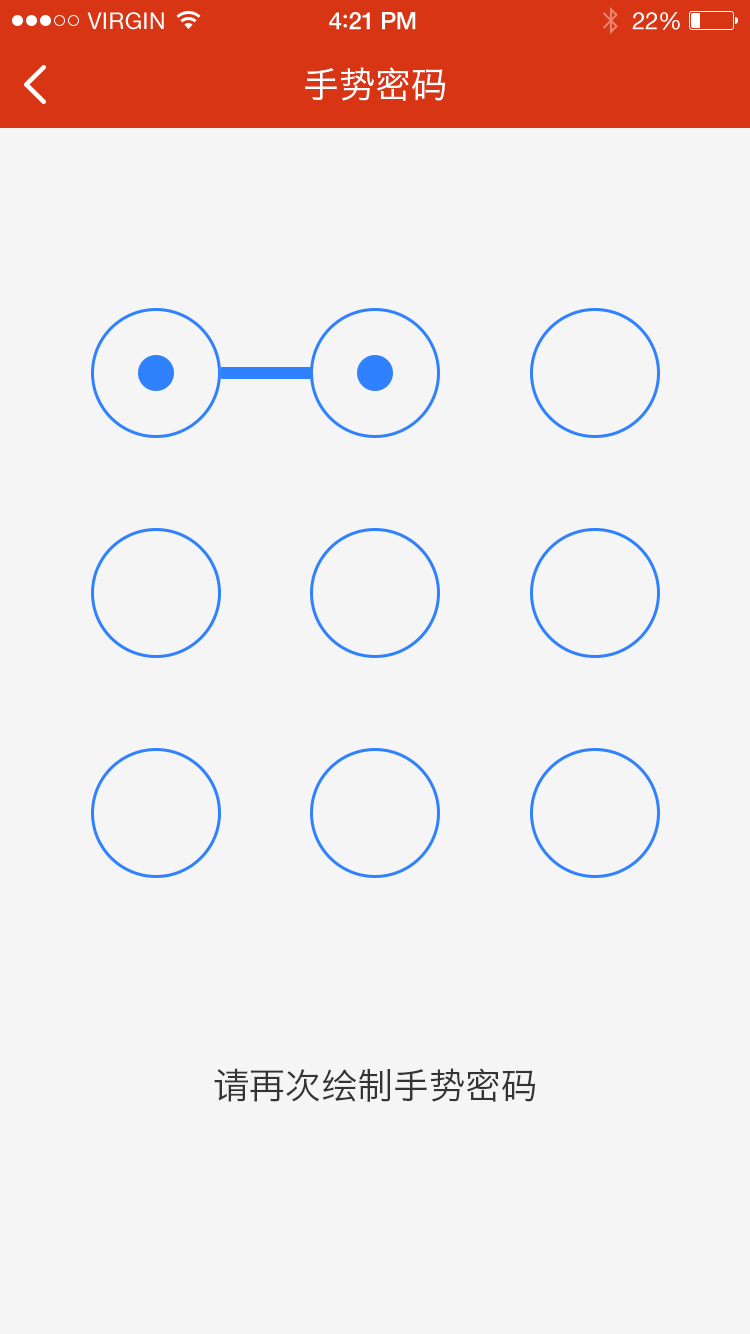
<style>
.page{position:relative;width:750px;height:1334px;background:#f5f5f5}
.page>*{position:absolute;margin:0}
.t1{font:23px "HelveticaNeue";letter-spacing:0.02em;color:#ffffff}
.t2{font:24px "HelveticaNeue-Medium";letter-spacing:-0.02em;color:#ffffff}
.t3{font:26px "Avenir-Medium";letter-spacing:-0.02em;color:#ffffff}
.t4{font:24px "HelveticaNeue";letter-spacing:-0.02em;color:#ffffff}
.t5{font:36px "HiraginoSansGB-W3";color:#ffffff}
.t6{font:36px "HiraginoSansGB-W3";color:#333333}
</style>
<div class="page">
<p class="t1" style="left:87px;top:12px;width:77px;height:18px">VIRGIN</p>
<p class="t2" style="left:329px;top:12px;width:87px;height:18px">4<span class="t3">:</span>21 PM</p>
<p class="t4" style="left:632px;top:12px;width:48px;height:18px">22%</p>
<p class="t5" style="left:305px;top:67px;width:141px;height:34px">手势密码</p>
<p class="t6" style="left:214px;top:1068px;width:322px;height:34px">请再次绘制手势密码</p>
</div>
